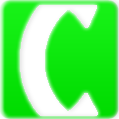
<style>
.page{position:relative;width:119px;height:119px}
.page>*{position:absolute;margin:0}
.t1{font:153.5px "KinoMT";color:#ffffff;font-weight:bold}
</style>
<div class="page">
<p class="t1" style="left:20px;top:5px;width:78px;height:111px">C</p>
</div>
